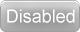
<style>
.page{position:relative;width:80px;height:32px}
.page>*{position:absolute;margin:0}
.t1{font:18px "ArialMT";color:#ffffff}
</style>
<div class="page">
<p class="t1" style="left:6px;top:7px;width:70px;height:21px">Disabled</p>
</div>
